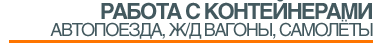
<style>
.page{position:relative;width:380px;height:46px;background:#ffffff}
.page>*{position:absolute;margin:0}
.t1{font:22.1px "Helios-Bold";letter-spacing:-0.08em;color:#43595f;text-transform:uppercase}
.t2{font:17.9px "Helios";letter-spacing:-0.08em;color:#43595f;text-transform:uppercase}
</style>
<div class="page">
<p class="t1" style="left:101px;top:0px;width:271px;height:20px">Работа с Контейнерами</p>
<p class="t2" style="left:50px;top:19px;width:323px;height:20px">Автопоезда, Ж/Д Вагоны, Самолёты</p>
</div>
